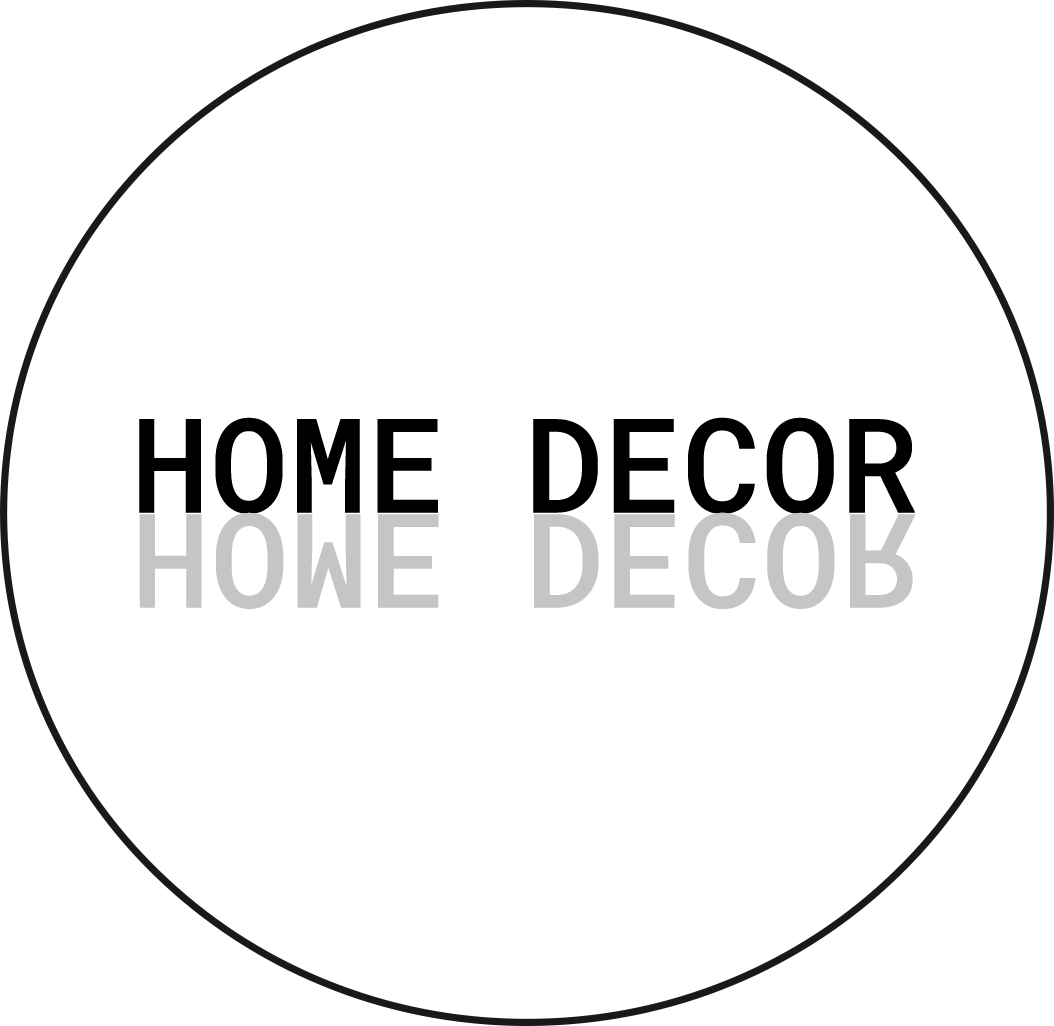
<style>
.page{position:relative;width:1054px;height:1026px;background:#ffffff}
.page>*{position:absolute;margin:0}
.t1{font:131.2px "RobotoMono-Medium";color:#000000}
.t2{font:131.2px "RobotoMono-Medium";color:#c5c5c5}
</style>
<div class="page">
<p class="t1" style="left:139px;top:417px;width:776px;height:97px">HOME DECOR</p>
<p class="t2" style="left:139px;top:512px;width:777px;height:97px">HOME DECOR</p>
</div>
